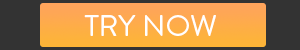
<style>
.page{position:relative;width:300px;height:50px;background:#333333}
.page>*{position:absolute;margin:0}
.t1{font:30px "BrandonGrotesque-Regular";color:#ffffff}
</style>
<div class="page">
<p class="t1" style="left:84px;top:15px;width:132px;height:21px">TRY NOW</p>
</div>
